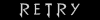
<style>
.page{position:relative;width:100px;height:20px;background:#000000}
.page>*{position:absolute;margin:0}
.t1{font:17.8px "RWBY_Style";letter-spacing:0.24em;color:#d4d4d4;scale:1.08 1}
</style>
<div class="page">
<p class="t1" style="left:19px;top:3px;width:61px;height:15px">retry</p>
</div>
